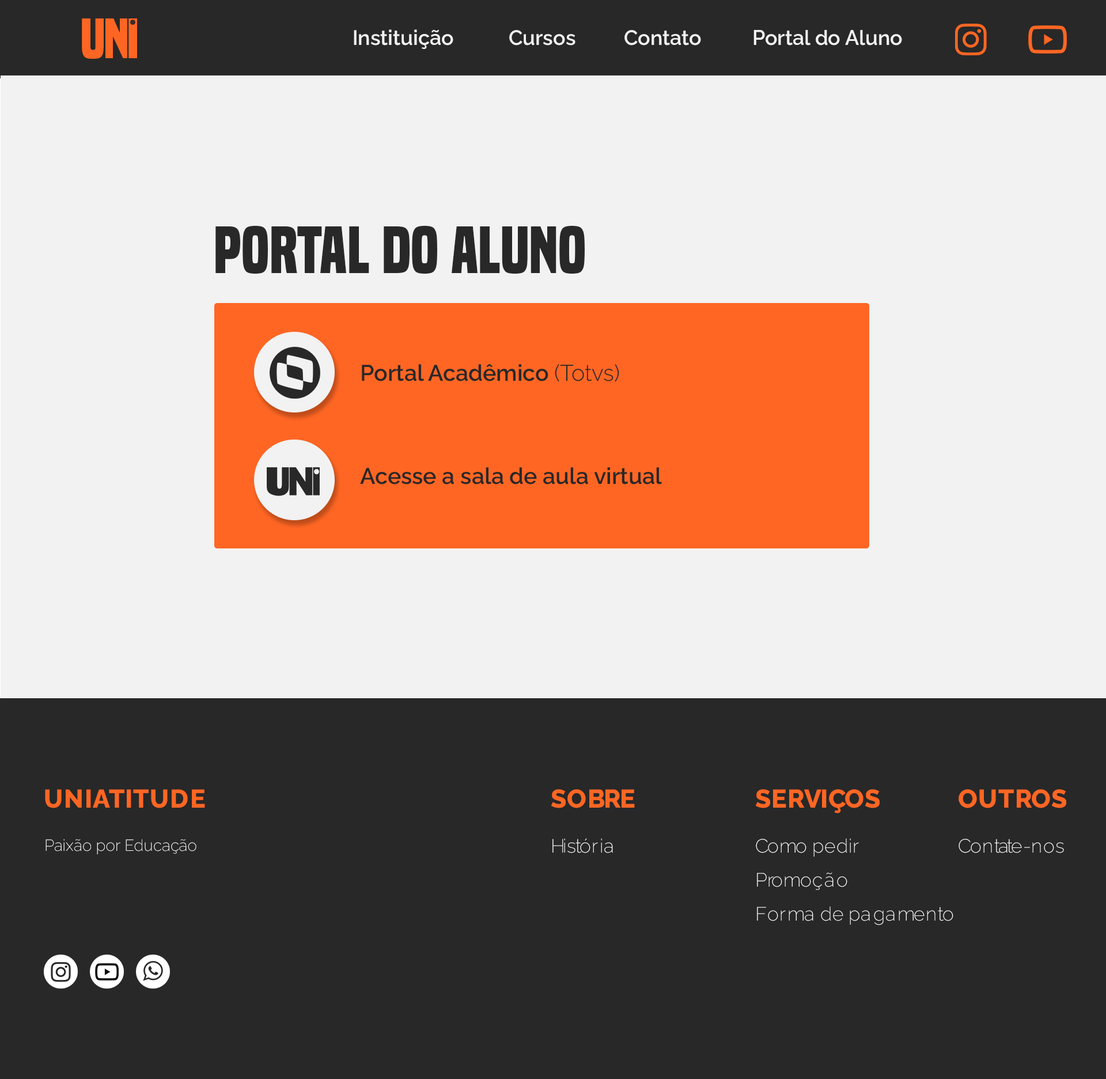
<style>
.page{position:relative;width:1106px;height:1079px;background:#f2f2f2}
.page>*{position:absolute;margin:0}
.t1{font:52.8px "BuiltTitlingRg-Bold";letter-spacing:-0.035em;color:#ff6623}
.t2{font:20.6px "Raleway-SemiBold";color:#f2f2f2}
.t3{font:61.4px "BuiltTitlingRg-Bold";color:#282828}
.t4{font:22.6px "Raleway-SemiBold";color:#282828}
.t5{font:22.6px "Raleway-Light";color:#282828}
.t6{font:25.6px "Raleway-ExtraBold";color:#ff6623}
.t7{font:16px "Raleway-ExtraLight";color:#ffffff}
.t8{font:19.2px "Raleway-ExtraLight";color:#ffffff}
.t9{font:19.2px/33.8px "Raleway-ExtraLight";color:#ffffff}
</style>
<div class="page">
<p class="t1" style="left:82px;top:18px;width:55px;height:41px">uni</p>
<p class="t2" style="left:354px;top:29px;width:99px;height:20px">Instituição</p>
<p class="t2" style="left:509px;top:30px;width:66px;height:15px">Cursos</p>
<p class="t2" style="left:624px;top:30px;width:77px;height:15px">Contato</p>
<p class="t2" style="left:753px;top:30px;width:149px;height:15px">Portal do Aluno</p>
<p class="t3" style="left:215px;top:226px;width:369px;height:48px">Portal do aluno</p>
<p class="t4" style="left:362px;top:364px;width:257px;height:18px">Portal Acadêmico <span class="t5">(Totvs)</span></p>
<p class="t4" style="left:360px;top:467px;width:302px;height:17px">Acesse a sala de aula virtual</p>
<p class="t6" style="left:45px;top:789px;width:160px;height:19px">UNIATITUDE</p>
<p class="t6" style="left:550px;top:789px;width:85px;height:19px">SOBRE</p>
<p class="t6" style="left:755px;top:789px;width:124px;height:24px">SERVIÇOS</p>
<p class="t6" style="left:958px;top:789px;width:108px;height:19px">OUTROS</p>
<p class="t7" style="left:45px;top:838px;width:151px;height:16px">Paixão por Educação</p>
<p class="t8" style="left:552px;top:838px;width:61px;height:15px">História</p>
<p class="t9" style="left:755px;top:838px;width:198px;height:87px">Como pedir<br>Promoção<br>Forma de pagamento</p>
<p class="t8" style="left:958px;top:838px;width:106px;height:15px">Contate-nos</p>
</div>
